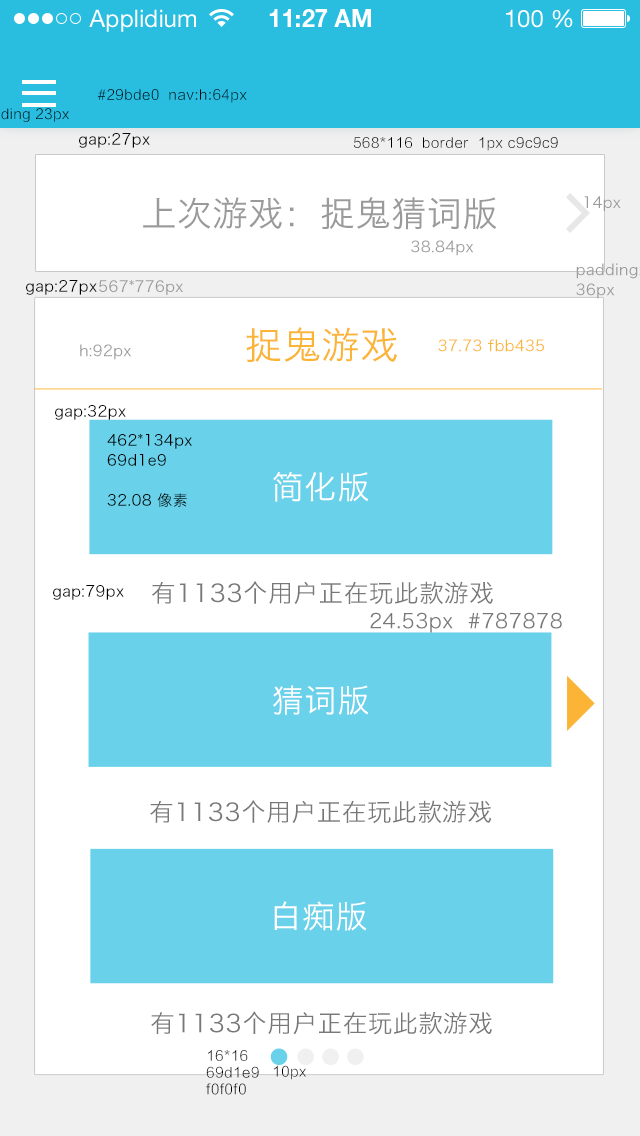
<style>
.page{position:relative;width:640px;height:1136px;background:#ffffff}
.page>*{position:absolute;margin:0}
.t1{font:14px "FZLTXHK";letter-spacing:0.03em;color:#000000}
.t2{font:15px "HiraginoSansGB-W3";letter-spacing:0.025em;color:#000000}
.t3{font:34.8px "HiraginoSansGB-W3";letter-spacing:0.025em;color:#9a9a9a}
.t4{font:15px "HiraginoSansGB-W3";letter-spacing:0.025em;color:#9a9a9a}
.t5{font:15px/20px "HiraginoSansGB-W3";letter-spacing:0.025em;color:#9a9a9a}
.t6{font:37.7px "HiraginoSansGB-W3";letter-spacing:0.025em;color:#fbb435}
.t7{font:15px "HiraginoSansGB-W3";letter-spacing:0.025em;color:#fbb435}
.t8{font:15px/20px "HiraginoSansGB-W3";letter-spacing:0.025em;color:#000000}
.t9{font:32.1px "HiraginoSansGB-W3";letter-spacing:0.025em;color:#ffffff}
.t10{font:24.5px "HiraginoSansGB-W3";letter-spacing:0.025em;color:#787878}
.t11{font:20px "HiraginoSansGB-W3";letter-spacing:0.025em;color:#787878}
</style>
<div class="page">
<p class="t1" style="left:97px;top:89px;width:150px;height:14px">#29bde0  nav:h:64px</p>
<p class="t2" style="left:79px;top:133px;width:71px;height:15px">gap:27px</p>
<p class="t1" style="left:353px;top:137px;width:205px;height:14px">568*116  border  1px c9c9c9</p>
<p class="t3" style="left:143px;top:197px;width:354px;height:33px">上次游戏：捉鬼猜词版</p>
<p class="t4" style="left:584px;top:196px;width:37px;height:15px">14px</p>
<p class="t4" style="left:411px;top:240px;width:63px;height:16px">38.84px</p>
<p class="t5" style="left:576px;top:263px;width:66px;height:36px">padding:<br>36px</p>
<p class="t2" style="left:26px;top:280px;width:71px;height:15px">gap:27px</p>
<p class="t4" style="left:99px;top:280px;width:84px;height:15px">567*776px</p>
<p class="t6" style="left:246px;top:327px;width:151px;height:35px">捉鬼游戏</p>
<p class="t7" style="left:438px;top:339px;width:106px;height:13px">37.73 fbb435</p>
<p class="t4" style="left:80px;top:344px;width:51px;height:16px">h:92px</p>
<p class="t2" style="left:55px;top:405px;width:71px;height:15px">gap:32px</p>
<p class="t8" style="left:107px;top:434px;width:85px;height:73px">462*134px<br>69d1e9<br><br>32.08 像素</p>
<p class="t9" style="left:273px;top:472px;width:96px;height:30px">简化版</p>
<p class="t10" style="left:152px;top:581px;width:341px;height:24px">有1133个用户正在玩此款游戏</p>
<p class="t2" style="left:53px;top:585px;width:71px;height:15px">gap:79px</p>
<p class="t11" style="left:370px;top:612px;width:192px;height:21px">24.53px  #787878</p>
<p class="t9" style="left:273px;top:685px;width:96px;height:30px">猜词版</p>
<p class="t10" style="left:150px;top:800px;width:342px;height:24px">有1133个用户正在玩此款游戏</p>
<p class="t9" style="left:274px;top:901px;width:93px;height:30px">白痴版</p>
<p class="t10" style="left:151px;top:1011px;width:341px;height:24px">有1133个用户正在玩此款游戏</p>
<p class="t1" style="left:206px;top:1050px;width:53px;height:45px;text-align:justify">16*16<br>69d1e9<br>f0f0f0</p>
<p class="t1" style="left:274px;top:1065px;width:32px;height:15px">10px</p>
</div>
